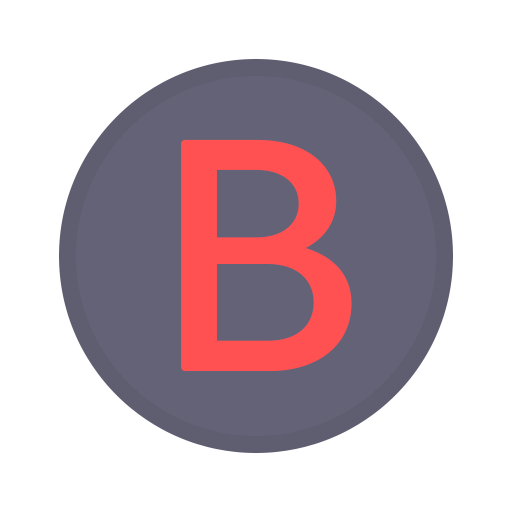
<style>
.page{position:relative;width:512px;height:512px;background:#ffffff}
.page>*{position:absolute;margin:0}
.t1{font:339.8px "Alpino-Medium";color:#ff5151}
</style>
<div class="page">
<p class="t1" style="left:181px;top:139px;width:171px;height:232px">B</p>
</div>
